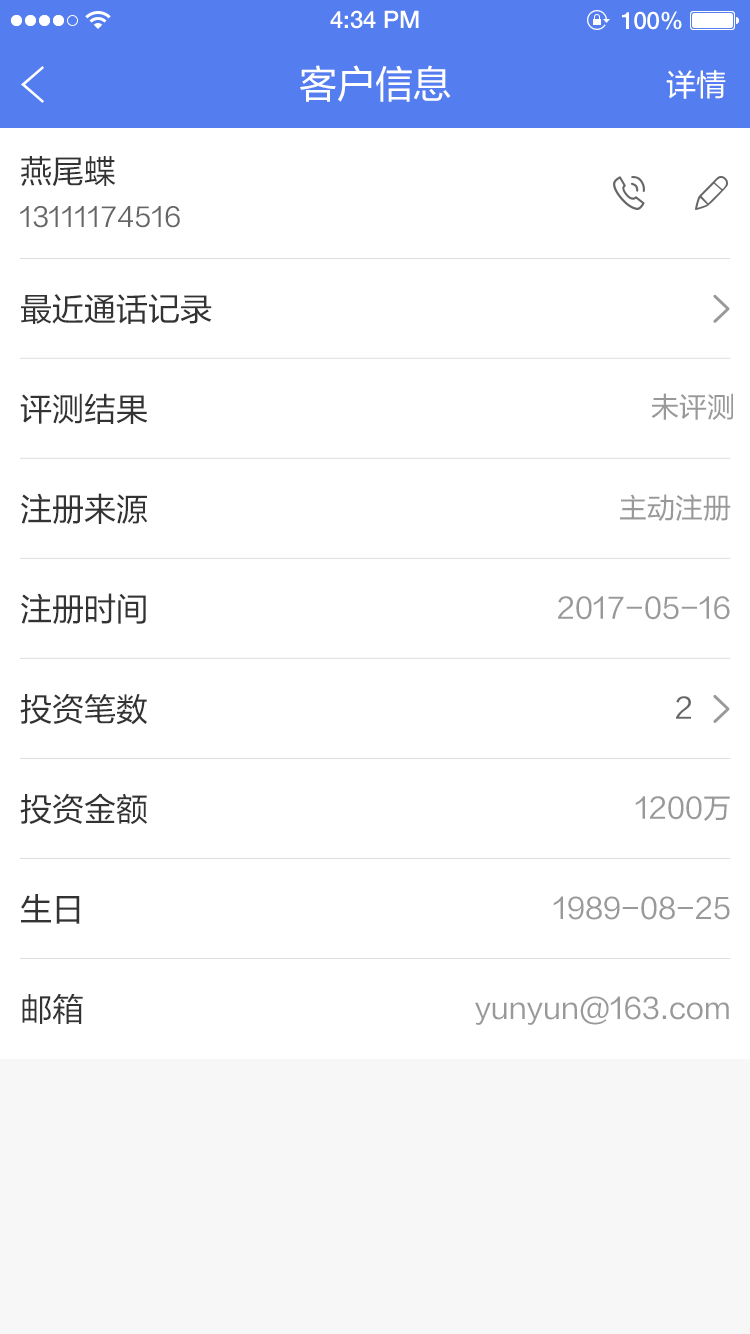
<style>
.page{position:relative;width:750px;height:1334px;background:#ffffff}
.page>*{position:absolute;margin:0}
.t1{font:24px "HelveticaNeueLTPro-Md";color:#ffffff}
.t2{font:38px "FZLTHJW-GB1-0";color:#ffffff}
.t3{font:30px "FZLTHJW-GB1-0";color:#ffffff}
.t4{font:32px "FZLTHJW-GB1-0";color:#333333}
.t5{font:26px "FZLTHJW-GB1-0";color:#666666}
.t6{font:28px "FZLTHJW-GB1-0";color:#999999}
.t7{font:28px "FZLTHJW-GB1-0";color:#666666}
</style>
<div class="page">
<p class="t1" style="left:330px;top:10px;width:89px;height:19px">4:34 PM</p>
<p class="t1" style="left:622px;top:11px;width:60px;height:19px">100%</p>
<p class="t2" style="left:300px;top:65px;width:151px;height:37px">客户信息</p>
<p class="t3" style="left:666px;top:70px;width:60px;height:29px">详情</p>
<p class="t4" style="left:21px;top:156px;width:95px;height:31px">燕尾蝶</p>
<p class="t5" style="left:20px;top:206px;width:160px;height:22px">13111174516</p>
<p class="t4" style="left:21px;top:294px;width:191px;height:30px">最近通话记录</p>
<p class="t4" style="left:20px;top:393px;width:128px;height:31px">评测结果</p>
<p class="t6" style="left:651px;top:393px;width:82px;height:27px">未评测</p>
<p class="t4" style="left:21px;top:493px;width:127px;height:31px">注册来源</p>
<p class="t6" style="left:620px;top:494px;width:111px;height:27px">主动注册</p>
<p class="t4" style="left:21px;top:593px;width:125px;height:31px">注册时间</p>
<p class="t6" style="left:558px;top:596px;width:172px;height:24px">2017-05-16</p>
<p class="t4" style="left:20px;top:693px;width:127px;height:32px">投资笔数</p>
<p class="t7" style="left:676px;top:696px;width:15px;height:23px">2</p>
<p class="t4" style="left:20px;top:793px;width:128px;height:32px">投资金额</p>
<p class="t6" style="left:635px;top:796px;width:95px;height:25px">1200万</p>
<p class="t4" style="left:21px;top:894px;width:59px;height:30px">生日</p>
<p class="t6" style="left:553px;top:896px;width:177px;height:24px">1989-08-25</p>
<p class="t4" style="left:22px;top:993px;width:61px;height:31px">邮箱</p>
<p class="t6" style="left:475px;top:996px;width:254px;height:29px">yunyun@163.com</p>
</div>
